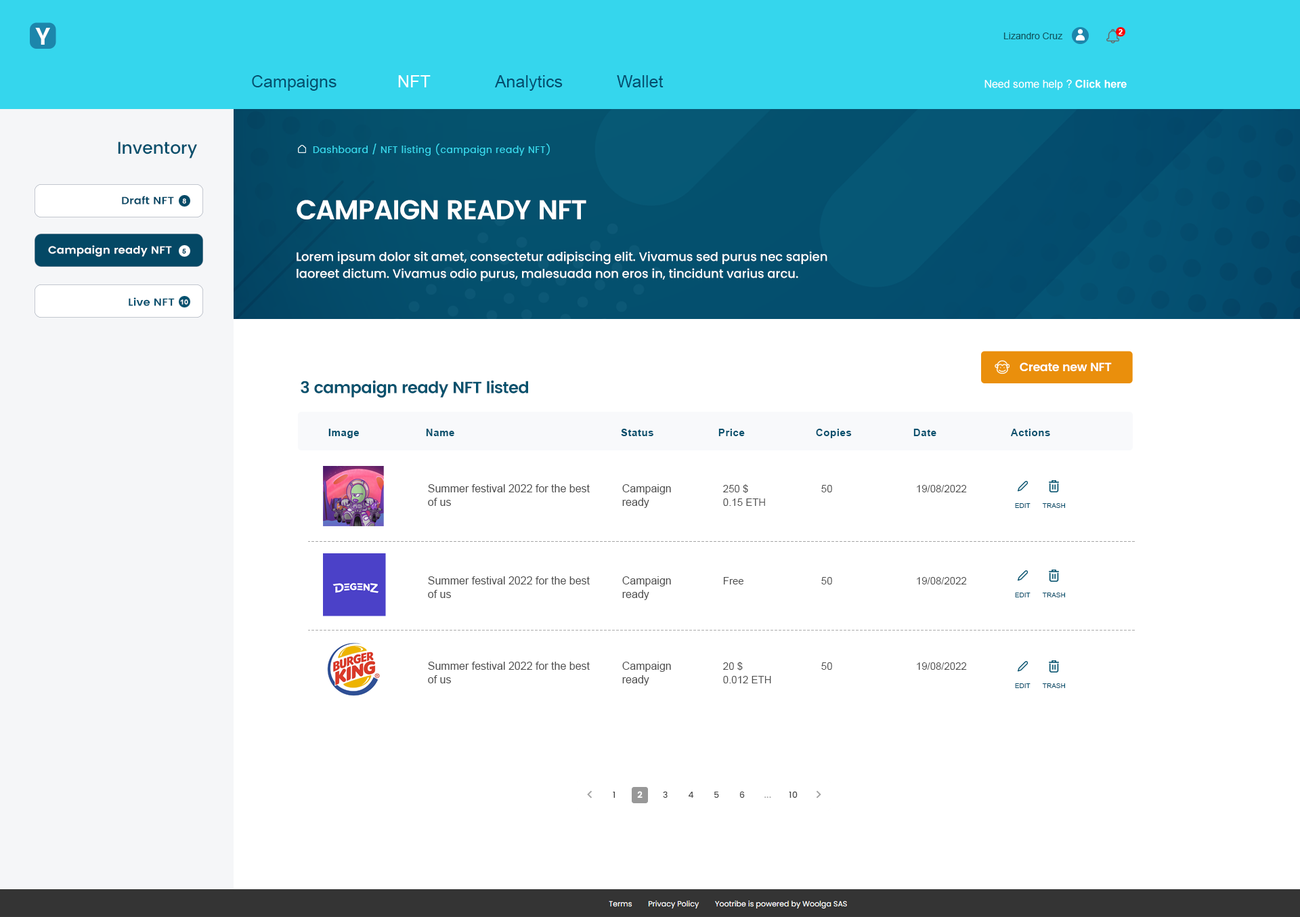
<style>
.page{position:relative;width:1300px;height:917px;background:#ffffff}
.page>*{position:absolute;margin:0}
.t1{font:23.7px "Poppins-SemiBold";color:#ffffff}
.t2{font:7.4px "Arial-BoldMT";color:#ffffff}
.t3{font:9.5px "ArialMT";color:#105761}
.t4{font:16.9px "ArialMT";color:#044d6e}
.t5{font:16.9px "ArialMT";color:#04506e}
.t6{font:16.9px "ArialMT";color:#ffffff}
.t7{font:10.8px "ArialMT";color:#ffffff}
.t8{font:10.8px "Arial-BoldMT";color:#ffffff}
.t9{font:16.9px "Poppins-Medium";color:#05506d}
.t10{font:9.5px "Poppins-Regular";letter-spacing:0.04em;color:#38d8ec}
.t11{font:10.5px "Poppins-SemiBold";color:#044866;scale:1.07 1}
.t12{font:6.8px "Arial-BoldMT";color:#ffffff;scale:1.07 1}
.t13{font:6.8px "Poppins-SemiBold";color:#ffffff;scale:1.07 1}
.t14{font:27.1px "Poppins-SemiBold";letter-spacing:-0.03em;color:#ffffff}
.t15{font:10.5px "Poppins-SemiBold";color:#ffffff;scale:1.07 1}
.t16{font:6.8px "Arial-BoldMT";color:#044865;scale:1.07 1}
.t17{font:12.2px/16.9px "Poppins-Medium";color:#ffffff}
.t18{font:10.5px "Poppins-SemiBold";color:#044f6e;scale:1.07 1}
.t19{font:6.8px "Arial-BoldMT";color:#f8f9fb;scale:1.07 1}
.t20{font:11.9px "Poppins-SemiBold";letter-spacing:-0.03em;color:#ffffff}
.t21{font:16.3px "Poppins-SemiBold";letter-spacing:-0.03em;color:#05516d}
.t22{font:10.2px "Arial-BoldMT";letter-spacing:0.04em;color:#05506d}
.t23{font:10.8px/13.5px "ArialMT";color:#4e4e4e}
.t24{font:10.2px/13.5px "ArialMT";color:#4e4e4e}
.t25{font:10.2px "ArialMT";color:#4e4e4e}
.t26{font:6.8px "ArialMT";color:#044e6b}
</style>
<div class="page">
<p class="t1" style="left:35px;top:28px;width:15px;height:17px">Y</p>
<p class="t2" style="left:1119px;top:29px;width:4px;height:6px">2</p>
<p class="t3" style="left:1004px;top:33px;width:59px;height:6px">Lizandro Cruz</p>
<p class="t4" style="left:252px;top:75px;width:412px;height:16px"><span class="t5">Campaigns   </span><span class="t6">NFT</span>   Analytics   Wallet</p>
<p class="t7" style="left:985px;top:79px;width:142px;height:11px">Need some help ? <span class="t8">Click here</span></p>
<p class="t9" style="left:118px;top:142px;width:79px;height:16px">Inventory</p>
<p class="t10" style="left:313px;top:144px;width:237px;height:12px">Dashboard / NFT listing (campaign ready NFT)</p>
<p class="t11" style="left:122px;top:196px;width:52px;height:9px">Draft NFT</p>
<p class="t12" style="left:182px;top:198px;width:4px;height:6px"><span class="t13"> </span>8</p>
<p class="t14" style="left:297px;top:200px;width:290px;height:19px">CAMPAIGN READY NFT</p>
<p class="t15" style="left:48px;top:245px;width:124px;height:12px">Campaign ready NFT</p>
<p class="t16" style="left:182px;top:249px;width:4px;height:5px">5</p>
<p class="t17" style="left:297px;top:251px;width:531px;height:30px">Lorem ipsum dolor sit amet, consectetur adipiscing elit. Vivamus sed purus nec sapien laoreet dictum. Vivamus odio purus, malesuada non eros in, tincidunt varius arcu.</p>
<p class="t18" style="left:129px;top:297px;width:46px;height:9px">Live NFT</p>
<p class="t19" style="left:180px;top:299px;width:8px;height:6px">10</p>
<p class="t20" style="left:1020px;top:362px;width:92px;height:10px">Create new NFT</p>
<p class="t21" style="left:301px;top:380px;width:227px;height:18px">3 campaign ready NFT listed</p>
<p class="t22" style="left:328px;top:429px;width:722px;height:9px">Image   Name       Status   Price   Copies   Date    Actions</p>
<p class="t23" style="left:428px;top:484px;width:162px;height:22px">Summer festival 2022 for the best<br>of us</p>
<p class="t23" style="left:622px;top:484px;width:49px;height:24px">Campaign<br>ready</p>
<p class="t24" style="left:723px;top:484px;width:42px;height:22px">250 $<br>0.15 ETH</p>
<p class="t25" style="left:822px;top:485px;width:10px;height:7px">50</p>
<p class="t25" style="left:917px;top:485px;width:50px;height:7px">19/08/2022</p>
<p class="t26" style="left:1015px;top:503px;width:16px;height:5px">EDIT</p>
<p class="t26" style="left:1042px;top:503px;width:23px;height:5px">TRASH</p>
<p class="t23" style="left:428px;top:576px;width:162px;height:22px">Summer festival 2022 for the best<br>of us</p>
<p class="t23" style="left:622px;top:576px;width:49px;height:24px">Campaign<br>ready</p>
<p class="t25" style="left:723px;top:577px;width:21px;height:7px">Free</p>
<p class="t25" style="left:822px;top:577px;width:10px;height:7px">50</p>
<p class="t25" style="left:917px;top:577px;width:50px;height:7px">19/08/2022</p>
<p class="t23" style="left:428px;top:662px;width:162px;height:21px">Summer festival 2022 for the best<br>of us</p>
<p class="t23" style="left:622px;top:662px;width:49px;height:23px">Campaign<br>ready</p>
<p class="t24" style="left:723px;top:662px;width:48px;height:21px">20 $<br>0.012 ETH</p>
<p class="t25" style="left:822px;top:662px;width:10px;height:8px">50</p>
<p class="t25" style="left:917px;top:662px;width:50px;height:8px">19/08/2022</p>
</div>
